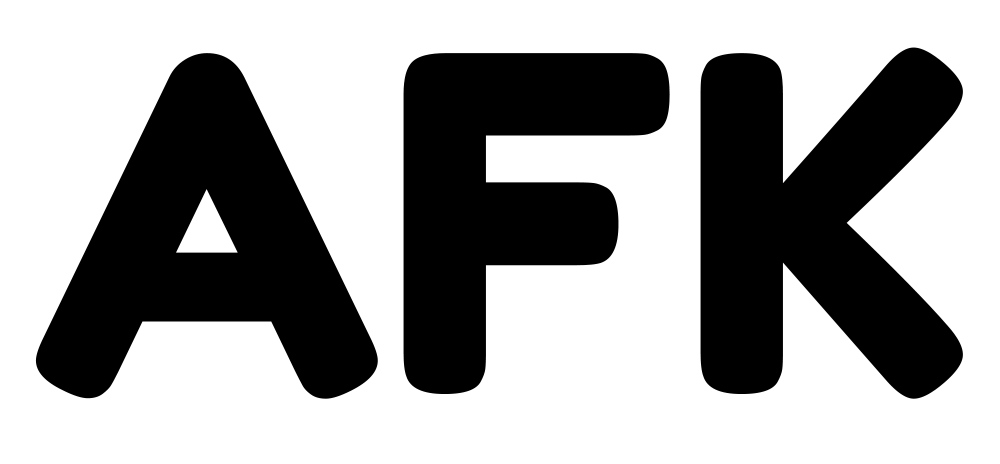
<style>
.page{position:relative;width:1000px;height:464px;background:#ffffff}
.page>*{position:absolute;margin:0}
.t1{font:465.4px "FredokaOne-Regular";color:#000000}
</style>
<div class="page">
<p class="t1" style="left:35px;top:47px;width:928px;height:352px">AFK</p>
</div>
